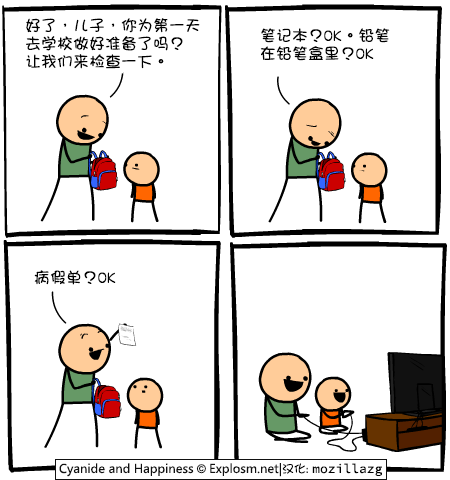
<style>
.page{position:relative;width:450px;height:480px;background:#ffffff}
.page>*{position:absolute;margin:0}
.t1{font:16px/18px "DFGirl";color:#000000}
.t2{font:16px "DFGirl";color:#000000}
</style>
<div class="page">
<p class="t1" style="left:26px;top:18px;width:174px;height:51px">好了，儿子，你为第一天<br>去学校做好准备了吗？<br>让我们来检查一下。</p>
<p class="t1" style="left:260px;top:28px;width:130px;height:33px">笔记本？OK。铅笔<br>在铅笔盒里？OK</p>
<p class="t2" style="left:34px;top:270px;width:82px;height:15px">病假单？OK</p>
</div>
